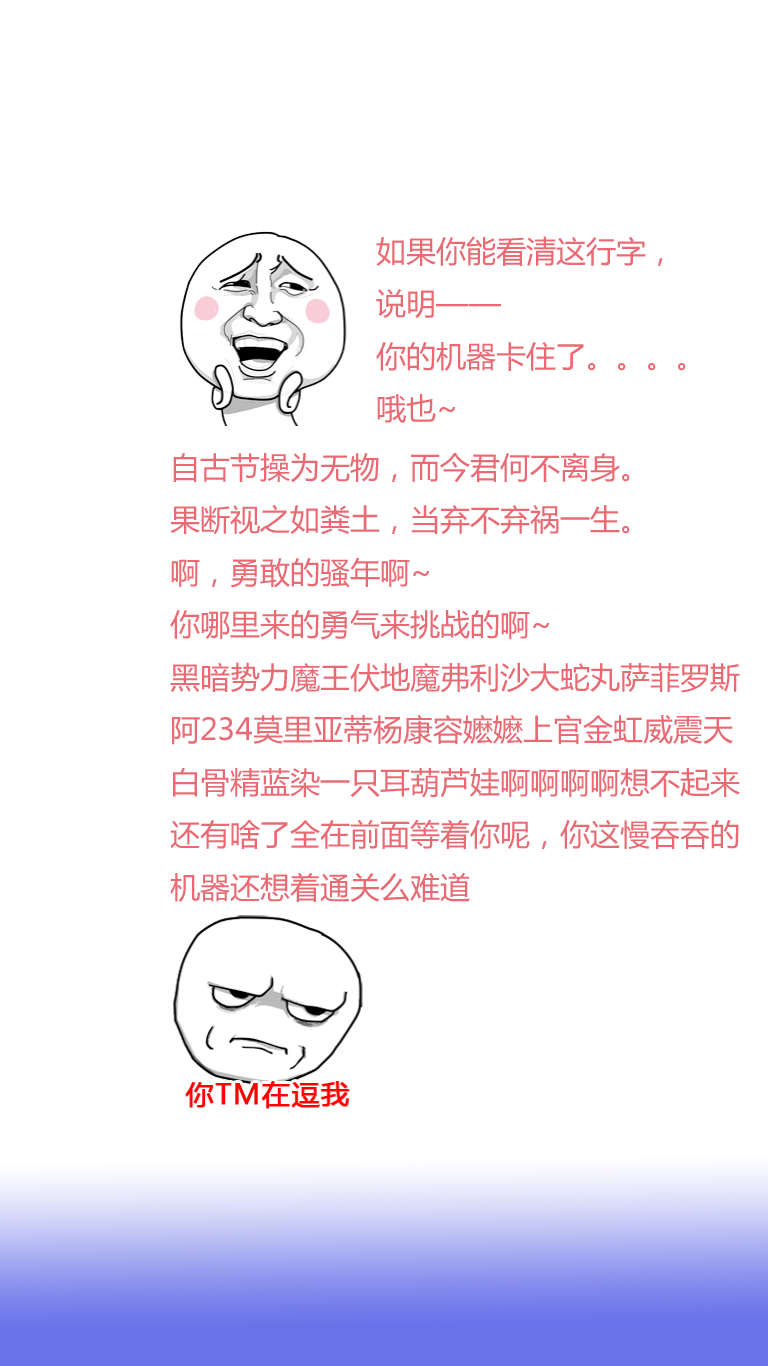
<style>
.page{position:relative;width:768px;height:1366px;background:#ffffff}
.page>*{position:absolute;margin:0}
.t1{font:30px "MicrosoftYaHei";color:#e96a73}
</style>
<div class="page">
<p class="t1" style="left:376px;top:236px;width:310px;height:187px">如果你能看清这行字，<br>说明——<br>你的机器卡住了。。。。<br>哦也~</p>
<p class="t1" style="left:170px;top:452px;width:570px;height:450px">自古节操为无物，而今君何不离身。<br>果断视之如粪土，当弃不弃祸一生。<br>啊，勇敢的骚年啊~<br>你哪里来的勇气来挑战的啊~<br>黑暗势力魔王伏地魔弗利沙大蛇丸萨菲罗斯<br>阿234莫里亚蒂杨康容嬷嬷上官金虹威震天<br>白骨精蓝染一只耳葫芦娃啊啊啊啊想不起来<br>还有啥了全在前面等着你呢，你这慢吞吞的<br>机器还想着通关么难道</p>
</div>
